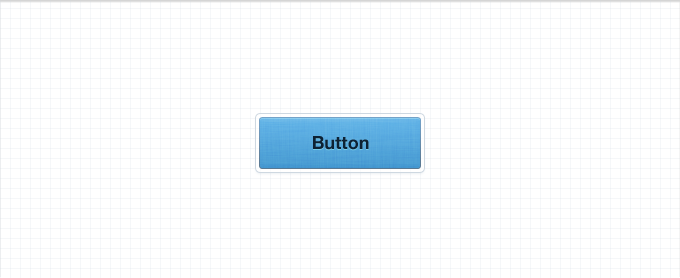
<style>
.page{position:relative;width:680px;height:278px;background:#ffffff}
.page>*{position:absolute;margin:0}
.t1{font:18px "HelveticaNeue-Bold";color:#0d2234}
</style>
<div class="page">
<p class="t1" style="left:313px;top:136px;width:56px;height:14px">Button</p>
</div>
